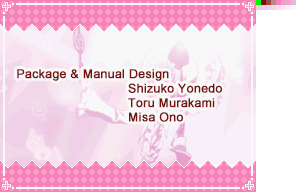
<style>
.page{position:relative;width:296px;height:192px}
.page>*{position:absolute;margin:0}
.t1{font:12px "ArialMT";letter-spacing:0.015em;color:#781010;font-weight:bold}
</style>
<div class="page">
<p class="t1" style="left:17px;top:69px;width:205px;height:53px">Package &amp; Manual Design<br>         Shizuko Yonedo<br>         Toru Murakami<br>         Misa Ono</p>
</div>
